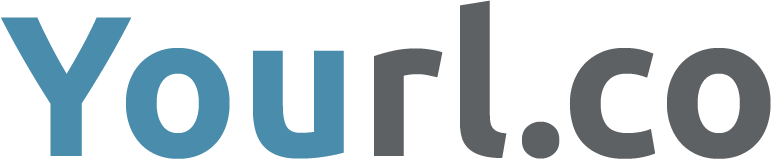
<style>
.page{position:relative;width:772px;height:160px;background:#ffffff}
.page>*{position:absolute;margin:0}
.t1{font:200px "Ubuntu-Bold";letter-spacing:0.01em;color:#5e6163}
.t2{font:200px "Ubuntu-Bold";letter-spacing:0.01em;color:#498cab}
</style>
<div class="page">
<p class="t1" style="left:1px;top:0px;width:770px;height:159px"><span class="t2">You</span>rl.co</p>
</div>
